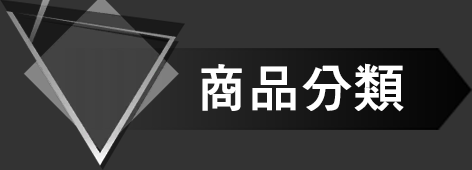
<style>
.page{position:relative;width:472px;height:170px;background:#333333}
.page>*{position:absolute;margin:0}
.t1{font:51.1px "DFHei-Bd-HK-BF";color:#ffffff;font-weight:bold}
</style>
<div class="page">
<p class="t1" style="left:201px;top:63px;width:203px;height:49px">商品分類</p>
</div>
